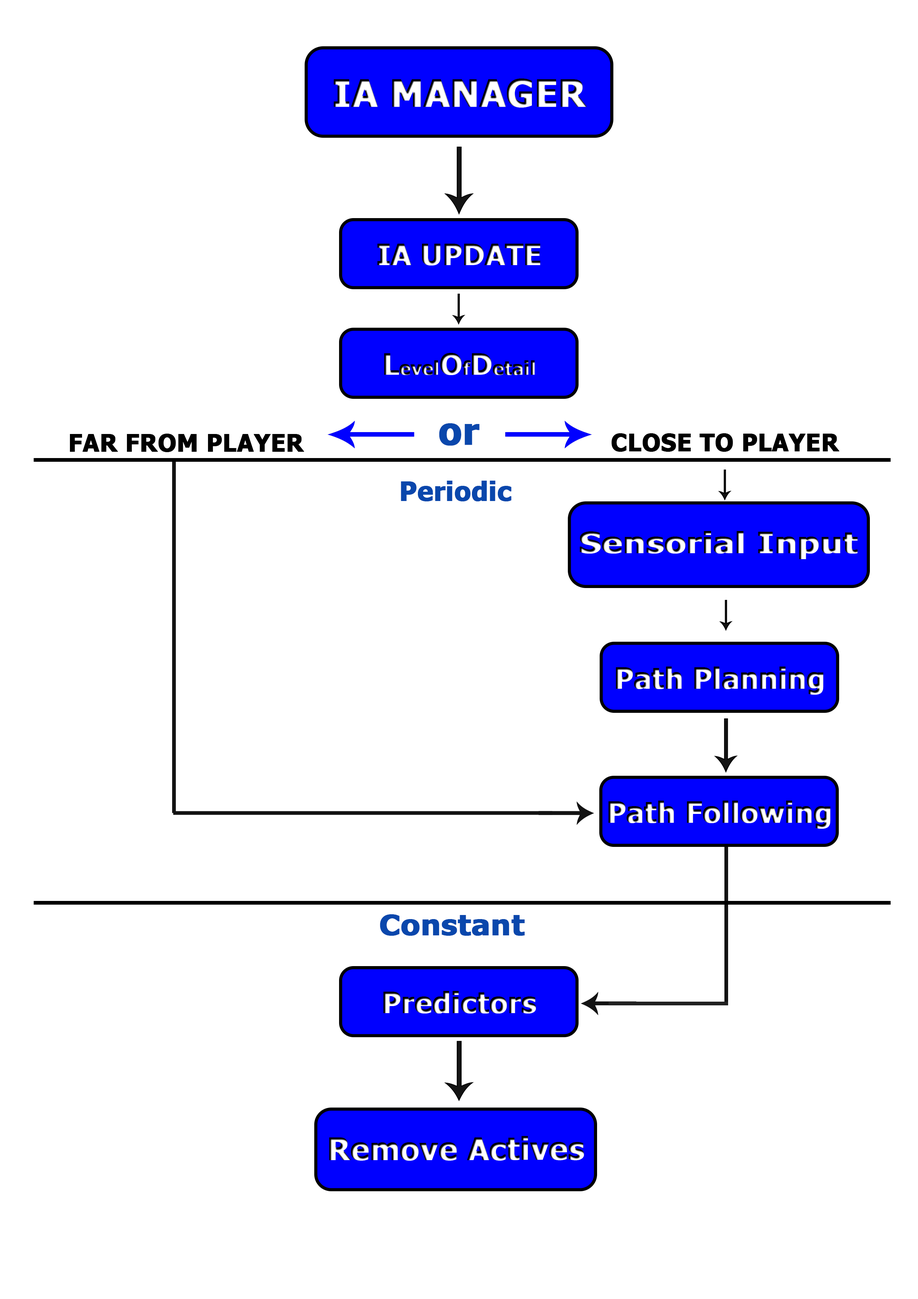
<style>
.page{position:relative;width:918px;height:1299px;background:#ffffff}
.page>*{position:absolute;margin:0}
.t1{font:37px "Tahoma-Bold";color:#ffffff;font-weight:bold}
.t2{font:28.7px "Tahoma-Bold";font-weight:bold}
.t3{font:18.5px "Tahoma-Bold";font-weight:bold}
.t4{font:37px "Tahoma-Bold";color:#0a47ac;font-weight:bold}
.t5{font:23.9px "Tahoma-Bold";color:#000000;font-weight:bold}
.t6{font:26.3px "Tahoma-Bold";color:#0a47ac;font-weight:bold}
.t7{font:28.8px "Tahoma-Bold";font-weight:bold;scale:1.19 1}
.t8{font:28.3px "Tahoma-Bold";color:#0a47ac;font-weight:bold;scale:1.09 1}
.t9{font:30.9px "Tahoma-Bold";font-weight:bold}
</style>
<div class="page">
<p class="t1" style="left:334px;top:78px;width:253px;height:30px">IA MANAGER</p>
<p class="t2" style="left:377px;top:244px;width:164px;height:21px">IA UPDATE</p>
<p class="t3" style="left:384px;top:353px;width:151px;height:22px"><span class="t2">L</span>evel<span class="t2">O</span>f<span class="t2">D</span>etail</p>
<p class="t4" style="left:439px;top:423px;width:41px;height:23px">or</p>
<p class="t5" style="left:70px;top:434px;width:234px;height:18px">FAR FROM PLAYER</p>
<p class="t5" style="left:612px;top:433px;width:228px;height:19px">CLOSE TO PLAYER</p>
<p class="t6" style="left:401px;top:481px;width:111px;height:20px">Periodic</p>
<p class="t7" style="left:580px;top:531px;width:278px;height:28px">Sensorial Input</p>
<p class="t2" style="left:616px;top:666px;width:208px;height:29px">Path Planning</p>
<p class="t2" style="left:608px;top:800px;width:223px;height:29px">Path Following</p>
<p class="t8" style="left:380px;top:914px;width:145px;height:22px">Constant</p>
<p class="t2" style="left:383px;top:991px;width:153px;height:22px">Predictors</p>
<p class="t9" style="left:329px;top:1135px;width:255px;height:26px">Remove Actives</p>
</div>
